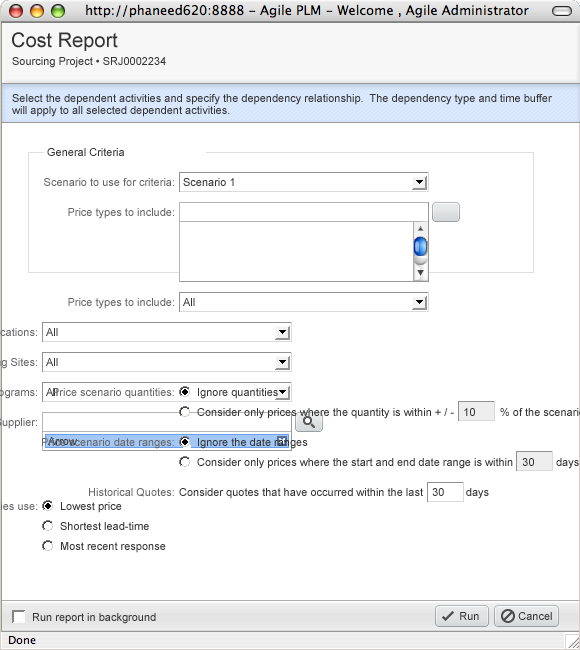
<style>
.page{position:relative;width:580px;height:650px;background:#ffffff}
.page>*{position:absolute;margin:0}
.t1{font:20px "ArialMT";color:#333333}
.t2{font:11px "ArialMT";color:#333333}
.t3{font:11px/12px "ArialMT";color:#333333}
.t4{font:11px "ArialMT";color:#666666}
.t5{font:11px/20px "ArialMT";color:#333333}
.t6{font:11px/17px "ArialMT";color:#333333}
</style>
<div class="page">
<p class="t1" style="left:12px;top:32px;width:106px;height:19px">Cost Report</p>
<p class="t2" style="left:12px;top:57px;width:154px;height:11px">Sourcing Project • SRJ0002234</p>
<p class="t3" style="left:12px;top:94px;width:540px;height:23px">Select the dependent activities and specify the dependency relationship.  The dependency type and time buffer<br>will apply to all selected dependent activities.</p>
<p class="t2" style="left:47px;top:148px;width:77px;height:8px">General Criteria</p>
<p class="t4" style="left:44px;top:178px;width:130px;height:8px">Scenario to use for criteria:</p>
<p class="t2" style="left:183px;top:178px;width:51px;height:8px">Scenario 1</p>
<p class="t4" style="left:68px;top:208px;width:106px;height:11px">Price types to include:</p>
<p class="t4" style="left:68px;top:298px;width:106px;height:11px">Price types to include:</p>
<p class="t2" style="left:183px;top:298px;width:12px;height:8px">All</p>
<p class="t2" style="left:46px;top:328px;width:12px;height:8px">All</p>
<p class="t2" style="left:46px;top:358px;width:12px;height:8px">All</p>
<p class="t2" style="left:46px;top:388px;width:12px;height:8px">All</p>
<p class="t4" style="left:53px;top:388px;width:121px;height:11px">Price scenario quantities:</p>
<p class="t4" style="left:42px;top:438px;width:132px;height:11px">Price scenario date ranges:</p>
<p class="t4" style="left:89px;top:488px;width:85px;height:9px">Historical Quotes:</p>
<p class="t2" style="left:179px;top:488px;width:310px;height:11px">Consider quotes that have occurred within the last   30       days</p>
<p class="t5" style="left:60px;top:502px;width:106px;height:51px"><span class="t6">Lowest price<br></span>Shortest lead-time<br>Most recent response</p>
<p class="t2" style="left:33px;top:613px;width:123px;height:11px">Run report in background</p>
<p class="t2" style="left:460px;top:612px;width:19px;height:8px">Run</p>
<p class="t2" style="left:518px;top:612px;width:34px;height:8px">Cancel</p>
</div>
